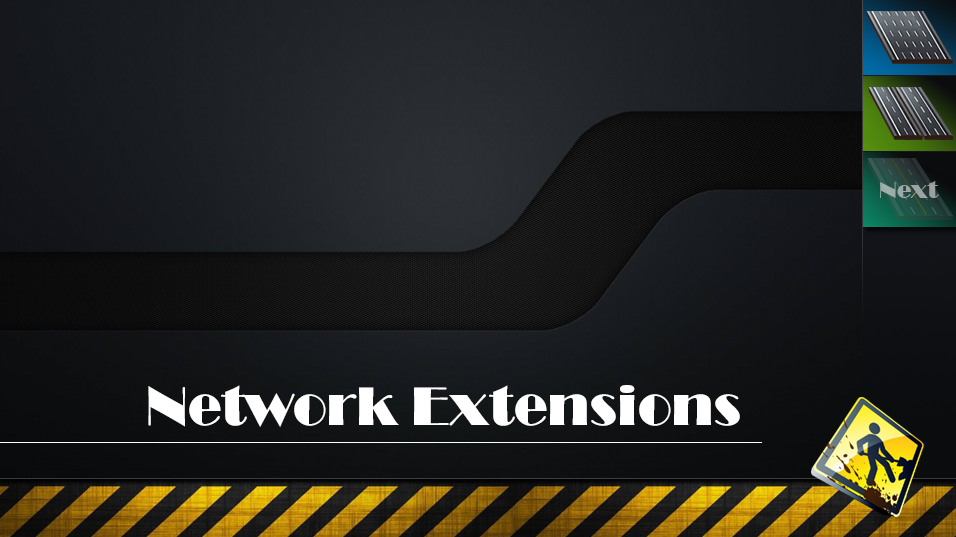
<style>
.page{position:relative;width:956px;height:537px}
.page>*{position:absolute;margin:0}
.t1{font:24px "Broadway";color:#9ca7a4}
.t2{font:56.2px "Broadway";color:#ffffff}
</style>
<div class="page">
<p class="t1" style="left:880px;top:181px;width:59px;height:17px">Next</p>
<p class="t2" style="left:148px;top:385px;width:592px;height:42px">Network Extensions</p>
</div>
